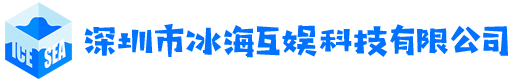
<style>
.page{position:relative;width:512px;height:80px;background:#ffffff}
.page>*{position:absolute;margin:0}
.t1{font:36px "HYZhuZiMuTouRenW";letter-spacing:0.05em;color:#0072ff}
</style>
<div class="page">
<p class="t1" style="left:84px;top:23px;width:424px;height:35px">深圳市冰海互娱科技有限公司</p>
</div>
